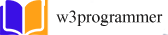
<style>
.page{position:relative;width:168px;height:35px;background:#ffffff}
.page>*{position:absolute;margin:0}
.t1{font:17.2px "MongolianBaiti";color:#1c1b1b}
</style>
<div class="page">
<p class="t1" style="left:56px;top:10px;width:107px;height:16px">w3programmer</p>
</div>
